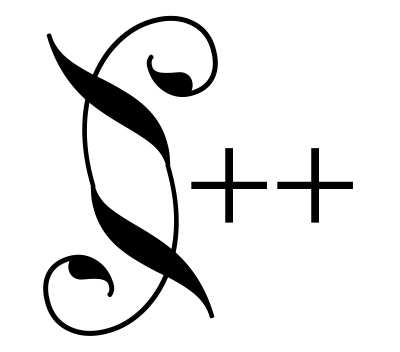
<style>
.page{position:relative;width:400px;height:352px;background:#ffffff}
.page>*{position:absolute;margin:0}
.t1{font:156.2px "HoeflerText-Ornaments";color:#000000}
.t2{font:156.2px "Gotham-Light";color:#000000}
</style>
<div class="page">
<p class="t1" style="left:46px;top:15px;width:172px;height:173px;rotate:74deg">a</p>
<p class="t2" style="left:191px;top:148px;width:76px;height:75px">+</p>
<p class="t2" style="left:277px;top:148px;width:76px;height:75px">+</p>
<p class="t1" style="left:43px;top:163px;width:172px;height:173px;rotate:74deg">b</p>
</div>
